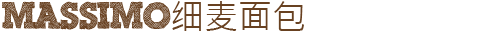
<style>
.page{position:relative;width:492px;height:34px;background:#ffffff}
.page>*{position:absolute;margin:0}
.t1{font:36px "ScribbleBoxDEMO";color:#684121}
.t2{font:34px "MicrosoftJhengHeiRegular";color:#684121}
</style>
<div class="page">
<p class="t1" style="left:2px;top:1px;width:302px;height:30px">Massimo<span class="t2">细麦面包</span></p>
</div>
